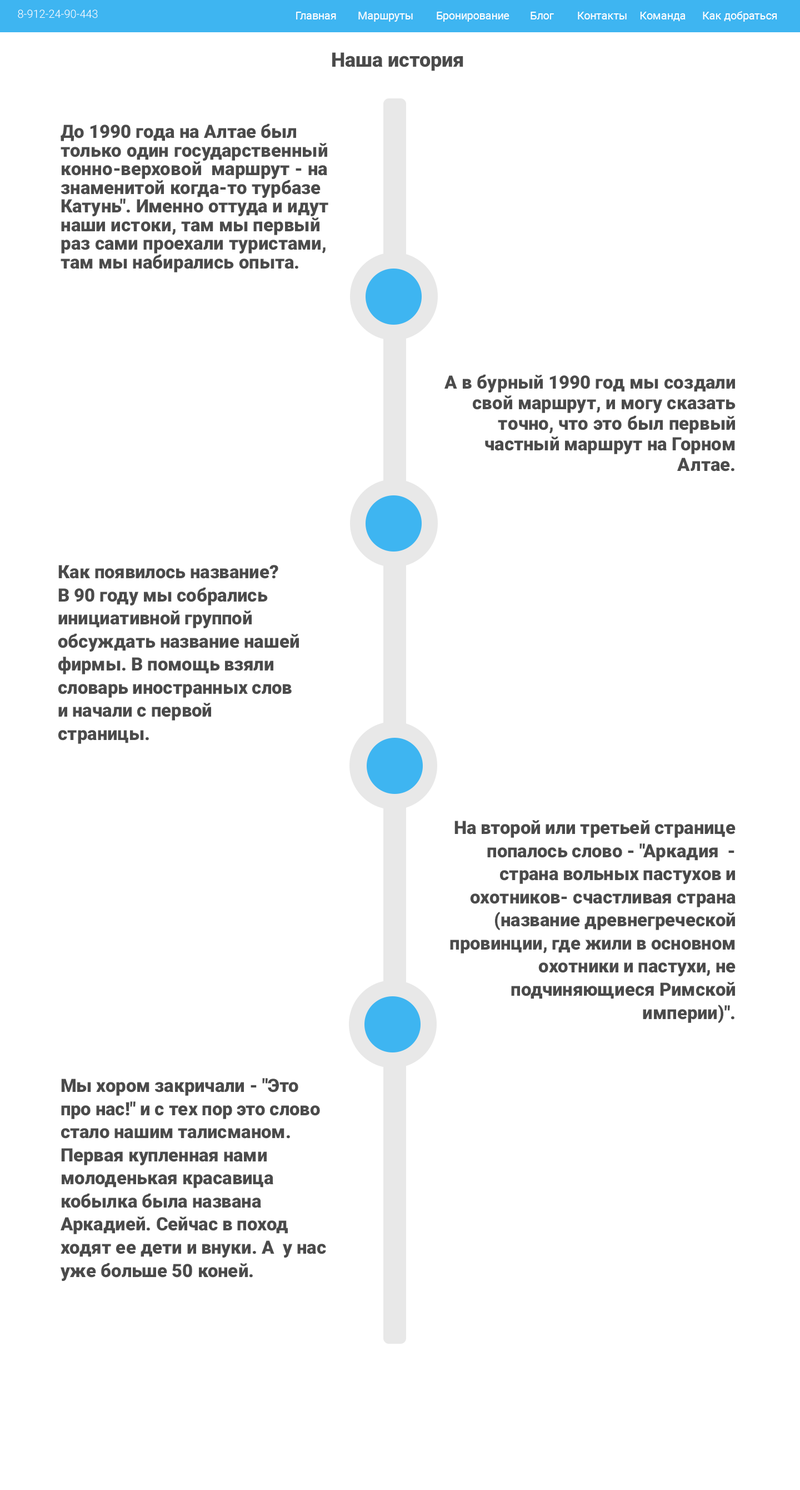
<style>
.page{position:relative;width:800px;height:1490px;background:#ffffff}
.page>*{position:absolute;margin:0}
.t1{font:11.1px "Roboto-Light";color:#ffffff}
.t2{font:10.9px "Roboto-Regular";color:#ffffff}
.t3{font:20px "Roboto-Black";color:#4b4b4b}
.t4{font:18.3px/18.6px "Roboto-Black";color:#4b4b4b}
.t5{font:18.3px/20.6px "Roboto-Black";color:#4b4b4b}
.t6{font:18.3px/23.1px "Roboto-Black";color:#4b4b4b}
</style>
<div class="page">
<p class="t1" style="left:18px;top:9px;width:80px;height:9px">8-912-24-90-443</p>
<p class="t2" style="left:296px;top:11px;width:482px;height:11px">Главная  Маршруты  Бронирование  Блог  Контакты Команда  Как добраться</p>
<p class="t3" style="left:332px;top:52px;width:132px;height:19px">Наша история</p>
<p class="t4" style="left:61px;top:123px;width:268px;height:149px">До 1990 года на Алтае был только один государственный конно-верховой  маршрут - на знаменитой когда-то турбазе Катунь". Именно оттуда и идут наши истоки, там мы первый раз сами проехали туристами, там мы набирались опыта.</p>
<p class="t5" style="left:445px;top:374px;width:291px;height:97px;text-align:right">А в бурный 1990 год мы создали свой маршрут, и могу сказать точно, что это был первый частный маршрут на Горном Алтае.</p>
<p class="t6" style="left:58px;top:565px;width:241px;height:179px">Как появилось название?<br>В 90 году мы собрались инициативной группой обсуждать название нашей фирмы. В помощь взяли словарь иностранных слов и начали с первой страницы.</p>
<p class="t6" style="left:450px;top:820px;width:286px;height:203px;text-align:right">На второй или третьей странице попалось слово - "Аркадия  - страна вольных пастухов и охотников- счастливая страна (название древнегреческой провинции, где жили в основном  охотники и пастухи, не подчиняющиеся Римской империи)".</p>
<p class="t6" style="left:61px;top:1078px;width:265px;height:203px">Мы хором закричали - "Это про нас!" и с тех пор это слово стало нашим талисманом. Первая купленная нами молоденькая красавица кобылка была названа Аркадией. Сейчас в поход ходят ее дети и внуки. А  у нас уже больше 50 коней.</p>
</div>
